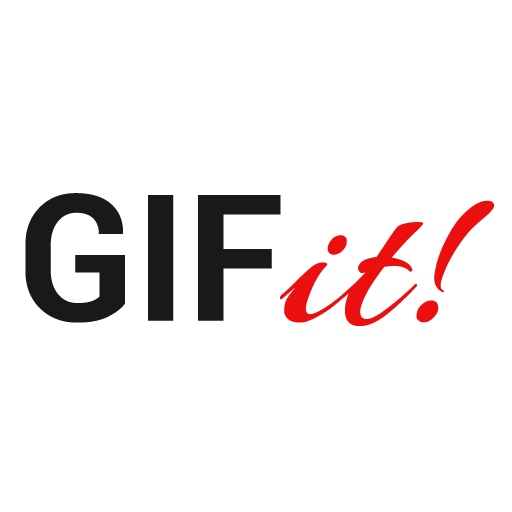
<style>
.page{position:relative;width:512px;height:512px;background:#ffffff}
.page>*{position:absolute;margin:0}
.t1{font:176.7px "Roboto-Bold";color:#191919}
.t2{font:220.9px "Arizonia-Regular";color:#eb0f0f}
</style>
<div class="page">
<p class="t1" style="left:25px;top:193px;width:470px;height:133px">GIF<span class="t2">it!</span></p>
</div>
